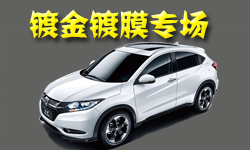
<style>
.page{position:relative;width:250px;height:150px;background:#61615f}
.page>*{position:absolute;margin:0}
.t1{font:30px "FZJZJW--GB1-0";color:#fffc05}
</style>
<div class="page">
<p class="t1" style="left:29px;top:9px;width:180px;height:30px">镀金镀膜专场</p>
</div>
